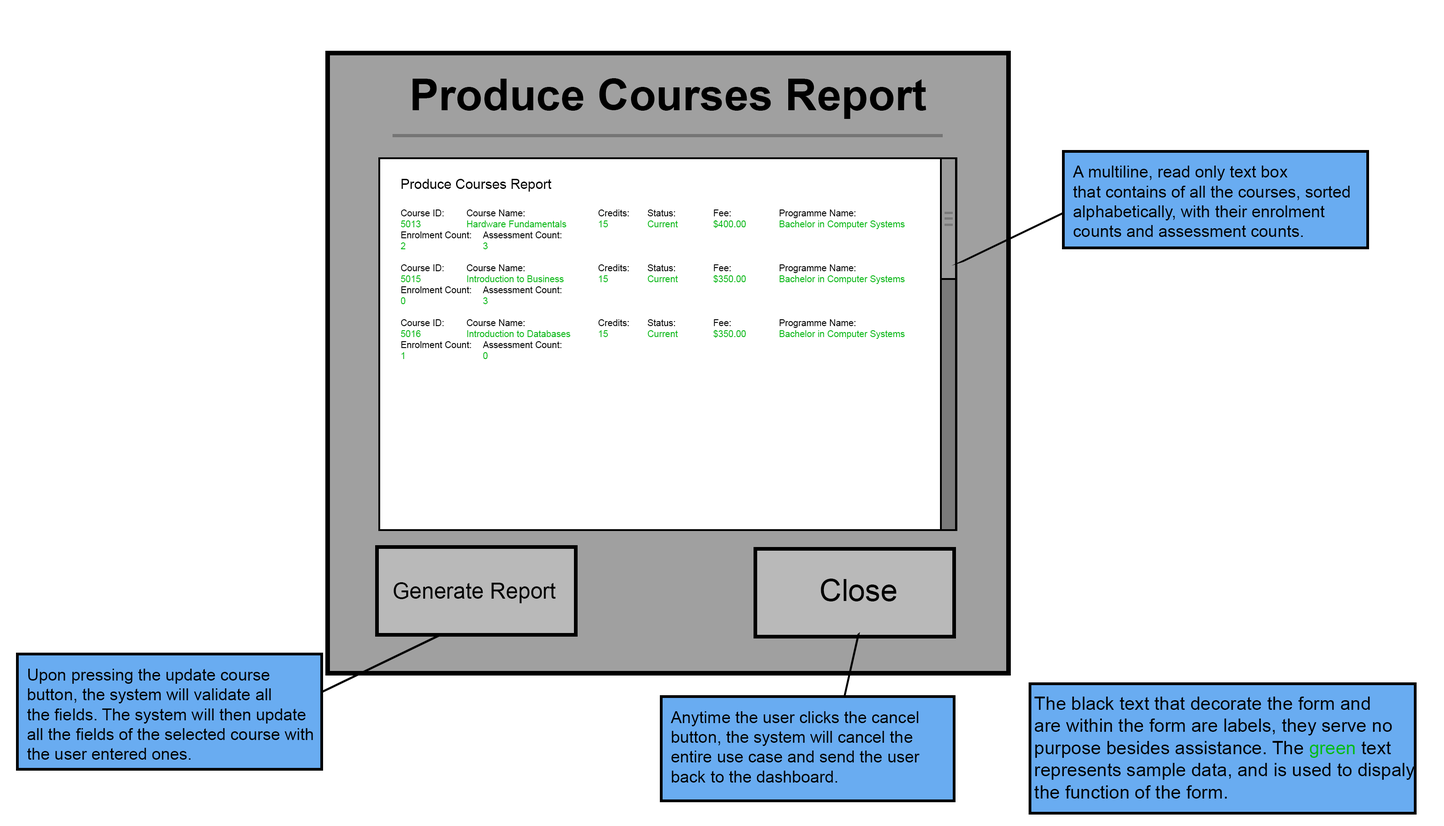
<style>
.page{position:relative;width:1444px;height:826px;background:#ffffff}
.page>*{position:absolute;margin:0}
.t1{font:43.9px "Arial-BoldMT";color:#000000}
.t2{font:16.5px "ArialMT";color:#000000}
.t3{font:9.1px "ArialMT";color:#04bb15}
.t4{font:13.7px "ArialMT";color:#000000}
.t5{font:9.1px "ArialMT";color:#000000}
.t6{font:21.9px "ArialMT";color:#000000}
.t7{font:30.5px "ArialMT";color:#000000}
.t8{font:18.5px "ArialMT";color:#000000}
.t9{font:18.5px "ArialMT";color:#04bb15}
</style>
<div class="page">
<p class="t1" style="left:413px;top:78px;width:514px;height:41px">Produce Courses Report</p>
<p class="t2" style="left:1073px;top:165px;width:277px;height:72px">A multiline, read only text box<br>that contains of all the courses, sorted<br>alphabetically, with their enrolment<br>counts and assessment counts.</p>
<p class="t3" style="left:401px;top:179px;width:504px;height:180px"><span class="t4">Produce Courses Report<br><br></span><span class="t5">Course ID:  Course Name:     Credits:  Status:   Fee:   Programme Name:<br></span>5013   Hardware Fundamentals  15   Current   $400.00  Bachelor in Computer Systems<br><span class="t5">Enrolment Count: Assessment Count:<br></span>2     3<br><br><span class="t5">Course ID:  Course Name:     Credits:  Status:   Fee:   Programme Name:<br></span>5015   Introduction to Business   15   Current   $350.00  Bachelor in Computer Systems<br><span class="t5">Enrolment Count: Assessment Count:<br></span>0     3<br><span class="t5"><br>Course ID:  Course Name:     Credits:  Status:   Fee:   Programme Name:<br></span>5016   Introduction to Databases  15   Current   $350.00  Bachelor in Computer Systems<br><span class="t5">Enrolment Count: Assessment Count:<br></span>1     0</p>
<p class="t6" style="left:394px;top:582px;width:162px;height:21px">Generate Report</p>
<p class="t7" style="left:821px;top:578px;width:76px;height:23px">Close</p>
<p class="t2" style="left:27px;top:668px;width:286px;height:91px">Upon pressing the update course<br>button, the system will validate all<br>the fields. The system will then update<br>all the fields of the selected course with<br>the user entered ones.</p>
<p class="t8" style="left:1034px;top:696px;width:381px;height:102px">The black text that decorate the form and<br>are within the form are labels, they serve no<br>purpose besides assistance. The <span class="t9">green </span>text<br>represents sample data, and is used to dispaly<br>the function of the form.</p>
<p class="t2" style="left:671px;top:711px;width:249px;height:71px">Anytime the user clicks the cancel<br>button, the system will cancel the<br>entire use case and send the user <br>back to the dashboard.</p>
</div>
